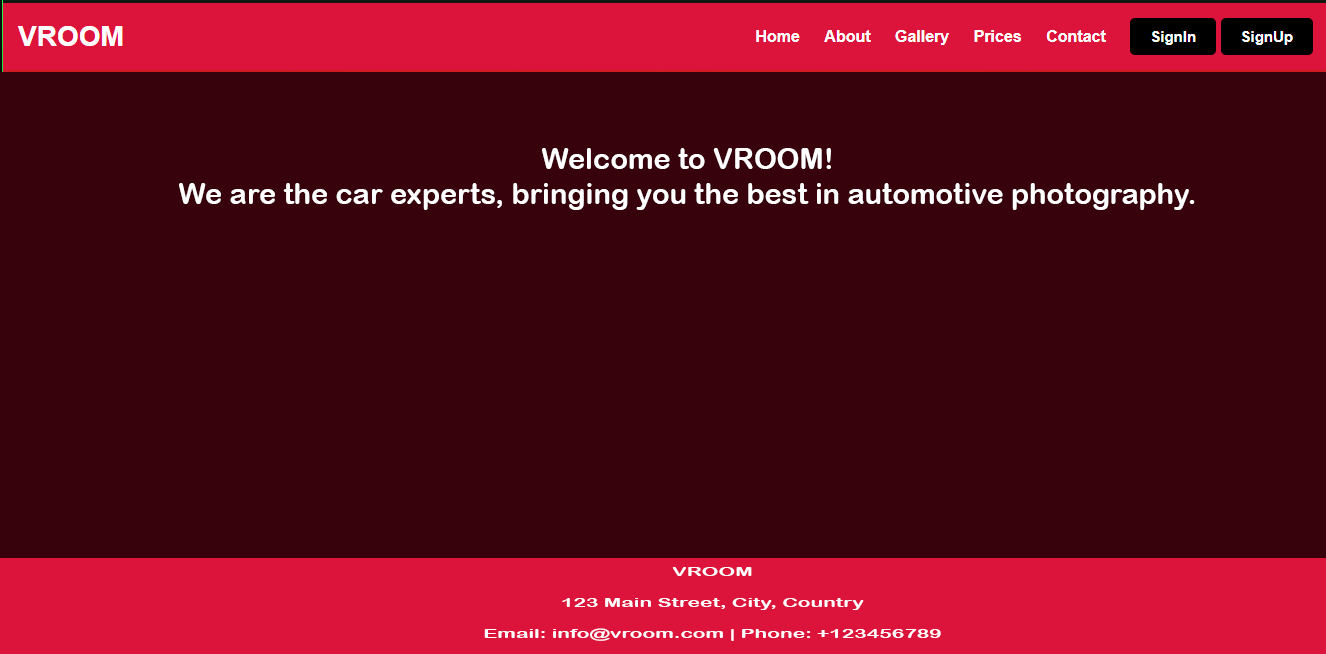
<style>
.page{position:relative;width:1326px;height:654px;background:#38020d}
.page>*{position:absolute;margin:0}
.t1{font:29px "ArialRoundedMTBold";color:#ffffff}
.t2{font:12.9px "ArialRoundedMTBold";color:#ffffff;scale:1.62 1}
</style>
<div class="page">
<p class="t1" style="left:179px;top:148px;width:1016px;height:62px;text-align:center">Welcome to VROOM!<br>We are the car experts, bringing you the best in automotive photography.</p>
<p class="t2" style="left:484px;top:567px;width:457px;height:74px;text-align:center">VROOM<br><br>123 Main Street, City, Country<br><br>Email: info@vroom.com | Phone: +123456789</p>
</div>
